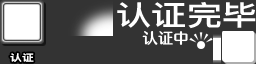
<style>
.page{position:relative;width:256px;height:64px;background:#333333}
.page>*{position:absolute;margin:0}
.t1{font:28px "DFKingGothicSC14-Semibold";letter-spacing:0.005em;color:#ffffff;scale:1.25 1}
.t2{font:14.7px "FZFW-QingYinTiS-B--GB1-0";letter-spacing:0.005em;color:#ffffff;scale:1.05 1}
.t3{font:9.3px "DFKingGothicSC14-Semibold";letter-spacing:0.005em;color:#ffffff;scale:1.25 1}
</style>
<div class="page">
<p class="t1" style="left:117px;top:2px;width:139px;height:27px">认证完毕</p>
<p class="t2" style="left:142px;top:31px;width:46px;height:14px">认证中</p>
<p class="t3" style="left:10px;top:53px;width:24px;height:9px">认证</p>
</div>
